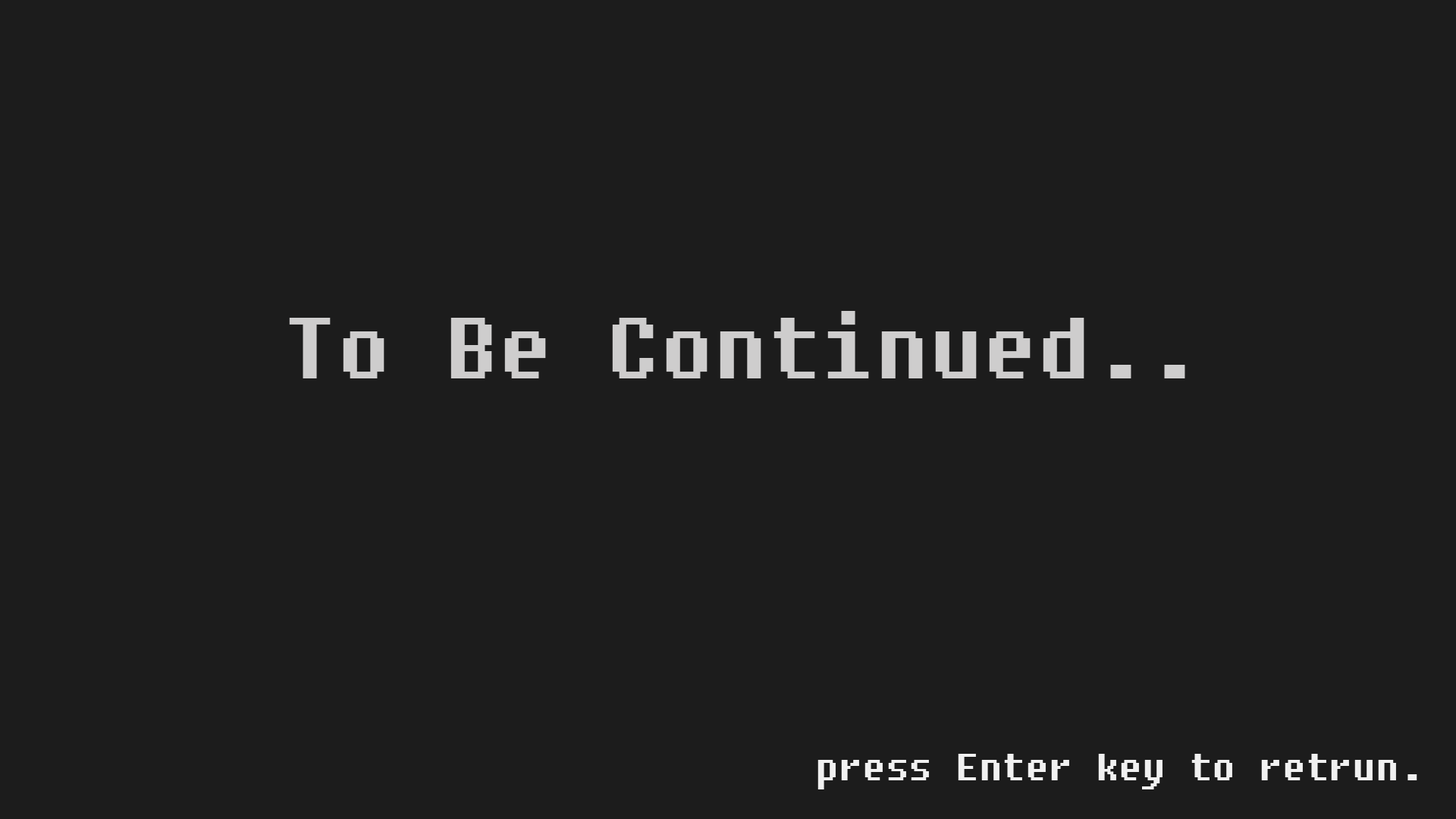
<style>
.page{position:relative;width:1456px;height:819px;background:#1c1c1c}
.page>*{position:absolute;margin:0}
.t1{font:107.7px "DungGeunMo";color:#cecdcd}
.t2{font:46.7px "DungGeunMo";color:#f1f1f1}
</style>
<div class="page">
<p class="t1" style="left:289px;top:311px;width:896px;height:67px">To Be Continued..</p>
<p class="t2" style="left:817px;top:754px;width:600px;height:35px">press Enter key to retrun.</p>
</div>
